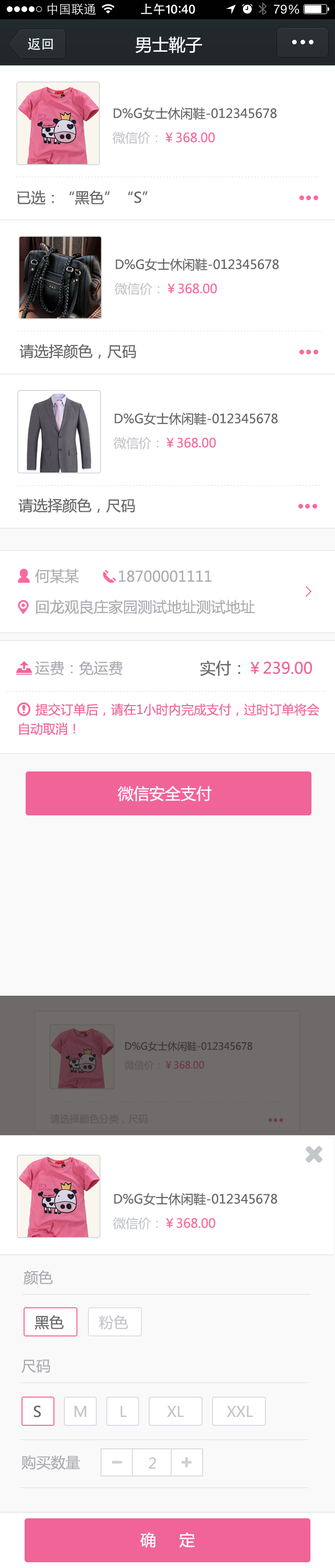
<style>
.page{position:relative;width:335px;height:1568px;background:#ffffff}
.page>*{position:absolute;margin:0}
.t1{font:16.7px "MicrosoftYaHei";color:#ffffff}
.t2{font:12.5px "MicrosoftYaHei";color:#676767}
.t3{font:12.5px "MicrosoftYaHei";color:#f86b9f}
.t4{font:12.5px "MicrosoftYaHei";color:#c3c6cb}
.t5{font:3.1px "SimSun";color:#dddddd}
.t6{font:14.6px "MicrosoftYaHei";color:#676767}
.t7{font:14.6px "MicrosoftYaHei";color:#abadb3}
.t8{font:15.7px "MicrosoftYaHei";color:#f16498}
.t9{font:15.7px "MicrosoftYaHei";color:#676767}
.t10{font:12.5px "MicrosoftYaHei";color:#f16498}
.t11{font:15.7px "MicrosoftYaHei";color:#ffffff}
.t12{font:9.8px "MicrosoftYaHei";color:#3a3736}
.t13{font:9.8px "MicrosoftYaHei"}
.t14{font:2.4px "SimSun";color:#63605f}
.t15{font:9.8px "MicrosoftYaHei";color:#5a5859}
.t16{font:14.6px "MicrosoftYaHei";color:#c3c6cb}
</style>
<div class="page">
<p class="t1" style="left:135px;top:37px;width:67px;height:16px">男士靴子</p>
<p class="t2" style="left:113px;top:107px;width:163px;height:13px">D%G女士休闲鞋-012345678</p>
<p class="t3" style="left:112px;top:132px;width:103px;height:12px"><span class="t4">微信价：</span>￥368.00</p>
<p class="t5" style="left:16px;top:177px;width:302px;height:0px">- - - - - - - - - - - - - - - - - - - - - - - - - - - - - - - - - - - - - - - - - - - - - - - - - - - - - - - - - - - - - - - - - - - - - - - - - - - - - - - - - - - - - - - - - - - - - - - - -</p>
<p class="t6" style="left:17px;top:190px;width:130px;height:15px">已选：“黑色”“S”</p>
<p class="t2" style="left:116px;top:258px;width:163px;height:13px">D%G女士休闲鞋-012345678</p>
<p class="t3" style="left:114px;top:283px;width:103px;height:12px"><span class="t4">微信价：</span>￥368.00</p>
<p class="t5" style="left:18px;top:331px;width:302px;height:0px">- - - - - - - - - - - - - - - - - - - - - - - - - - - - - - - - - - - - - - - - - - - - - - - - - - - - - - - - - - - - - - - - - - - - - - - - - - - - - - - - - - - - - - - - - - - - - - - - -</p>
<p class="t6" style="left:19px;top:344px;width:117px;height:15px">请选择颜色，尺码</p>
<p class="t2" style="left:114px;top:412px;width:164px;height:13px">D%G女士休闲鞋-012345678</p>
<p class="t3" style="left:113px;top:437px;width:103px;height:12px"><span class="t4">微信价：</span>￥368.00</p>
<p class="t5" style="left:17px;top:485px;width:302px;height:1px">- - - - - - - - - - - - - - - - - - - - - - - - - - - - - - - - - - - - - - - - - - - - - - - - - - - - - - - - - - - - - - - - - - - - - - - - - - - - - - - - - - - - - - - - - - - - - - - - -</p>
<p class="t6" style="left:18px;top:498px;width:117px;height:15px">请选择颜色，尺码</p>
<p class="t7" style="left:35px;top:569px;width:44px;height:14px">何某某</p>
<p class="t7" style="left:119px;top:570px;width:92px;height:12px">18700001111</p>
<p class="t7" style="left:36px;top:599px;width:219px;height:15px">回龙观良庄家园测试地址测试地址</p>
<p class="t7" style="left:35px;top:661px;width:87px;height:14px">运费：免运费</p>
<p class="t8" style="left:200px;top:660px;width:112px;height:16px"><span class="t9">实付：</span>￥239.00</p>
<p class="t5" style="left:7px;top:691px;width:318px;height:0px">- - - - - - - - - - - - - - - - - - - - - - - - - - - - - - - - - - - - - - - - - - - - - - - - - - - - - - - - - - - - - - - - - - - - - - - - - - - - - - - - - - - - - - - - - - - - - - - - - - - - - -</p>
<p class="t10" style="left:36px;top:704px;width:283px;height:12px">提交订单后，请在1小时内完成支付，过时订单将会</p>
<p class="t10" style="left:19px;top:722px;width:56px;height:13px">自动取消！</p>
<p class="t11" style="left:118px;top:786px;width:94px;height:16px">微信安全支付</p>
<p class="t12" style="left:125px;top:1041px;width:127px;height:10px">D%G女士休闲鞋-012345678</p>
<p class="t13" style="left:124px;top:1060px;width:80px;height:10px">微信价：￥368.00</p>
<p class="t14" style="left:49px;top:1102px;width:235px;height:0px">- - - - - - - - - - - - - - - - - - - - - - - - - - - - - - - - - - - - - - - - - - - - - - - - - - - - - - - - - - - - - - - - - - - - - - - - - - - - - - - - - - - - - - - - - - - - - - - - -</p>
<p class="t15" style="left:50px;top:1114px;width:97px;height:10px">请选择颜色分类，尺码</p>
<p class="t2" style="left:114px;top:1193px;width:163px;height:12px">D%G女士休闲鞋-012345678</p>
<p class="t3" style="left:113px;top:1217px;width:102px;height:13px"><span class="t4">微信价：</span>￥368.00</p>
<p class="t7" style="left:24px;top:1270px;width:29px;height:15px">颜色</p>
<p class="t6" style="left:34px;top:1315px;width:30px;height:15px">黑色</p>
<p class="t16" style="left:99px;top:1315px;width:29px;height:15px">粉色</p>
<p class="t7" style="left:21px;top:1359px;width:29px;height:14px">尺码</p>
<p class="t6" style="left:33px;top:1405px;width:8px;height:12px">S</p>
<p class="t16" style="left:74px;top:1405px;width:12px;height:12px">M</p>
<p class="t16" style="left:120px;top:1405px;width:6px;height:12px">L</p>
<p class="t16" style="left:167px;top:1405px;width:16px;height:12px">XL</p>
<p class="t16" style="left:226px;top:1405px;width:27px;height:12px">XXL</p>
<p class="t7" style="left:21px;top:1455px;width:59px;height:15px">购买数量</p>
<p class="t16" style="left:148px;top:1457px;width:8px;height:12px">2</p>
<p class="t11" style="left:140px;top:1532px;width:54px;height:16px">确     定</p>
</div>
